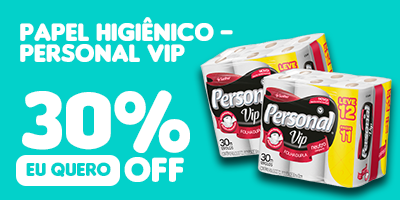
<style>
.page{position:relative;width:400px;height:200px;background:#03d1ca}
.page>*{position:absolute;margin:0}
.t1{font:26.5px "Insaniburger";color:#ffffff}
.t2{font:85.7px "Insaniburger";color:#ffffff}
.t3{font:36.8px "Insaniburger";color:#ffffff}
</style>
<div class="page">
<p class="t1" style="left:20px;top:17px;width:213px;height:24px">papel higiênico -</p>
<p class="t1" style="left:20px;top:44px;width:165px;height:18px">personal vip</p>
<p class="t2" style="left:22px;top:90px;width:168px;height:63px">30%</p>
<p class="t3" style="left:124px;top:157px;width:60px;height:25px">off</p>
</div>
